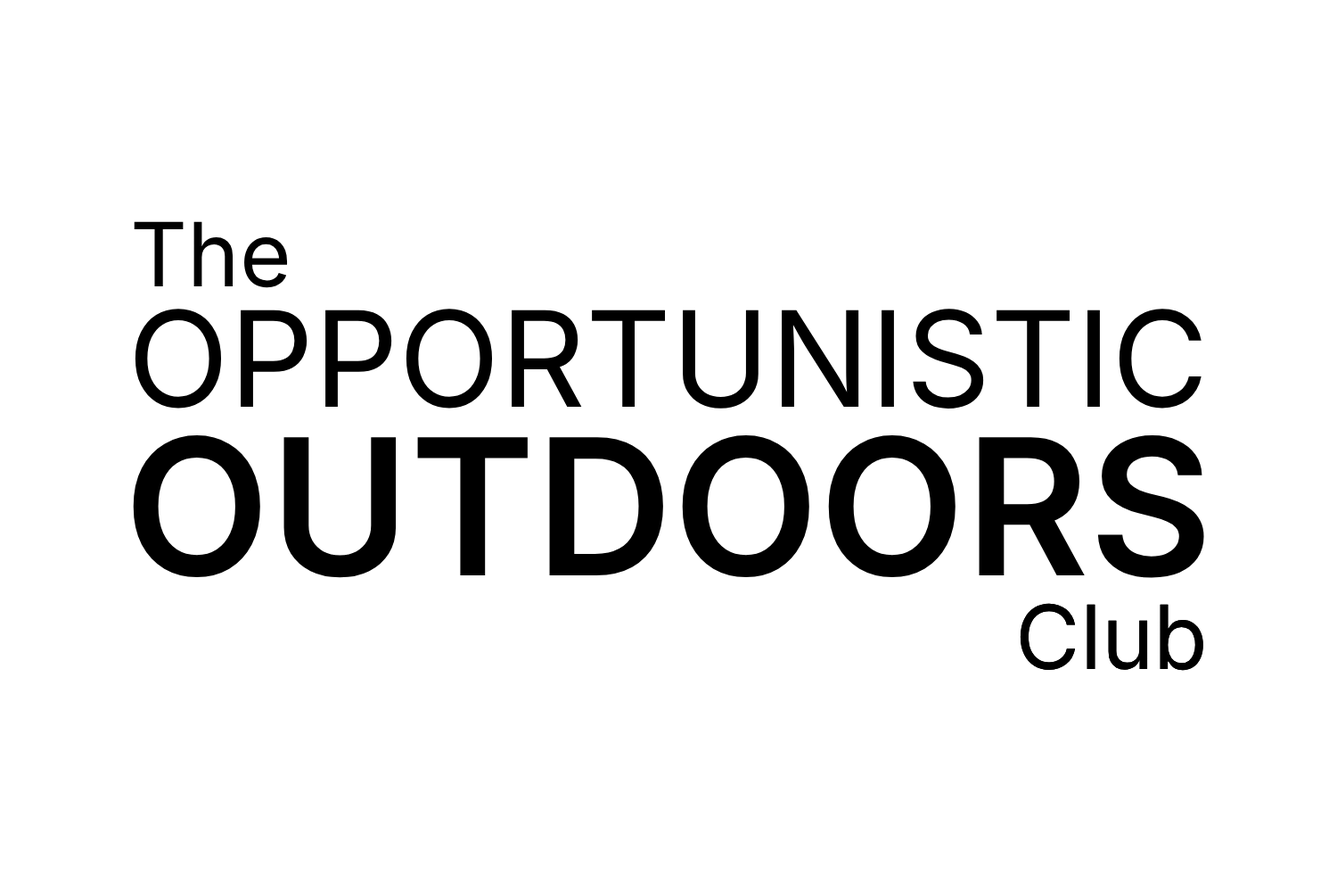
<style>
.page{position:relative;width:1337px;height:892px;background:#ffffff}
.page>*{position:absolute;margin:0}
.t1{font:88.5px "Inter-Regular";color:#000000}
.t2{font:132.8px "Inter-Regular";color:#000000}
.t3{font:189.7px "Inter-Bold_14.000opsz_600.000wght";letter-spacing:0.002em;color:#000000}
</style>
<div class="page">
<p class="t1" style="left:134px;top:221px;width:154px;height:67px">The</p>
<p class="t2" style="left:135px;top:308px;width:1067px;height:100px">OPPORTUNISTIC</p>
<p class="t3" style="left:133px;top:435px;width:1072px;height:143px">OUTDOORS</p>
<p class="t1" style="left:1020px;top:603px;width:184px;height:67px">Club</p>
<p class="t1" style="left:1020px;top:603px;width:184px;height:67px">Club</p>
</div>
